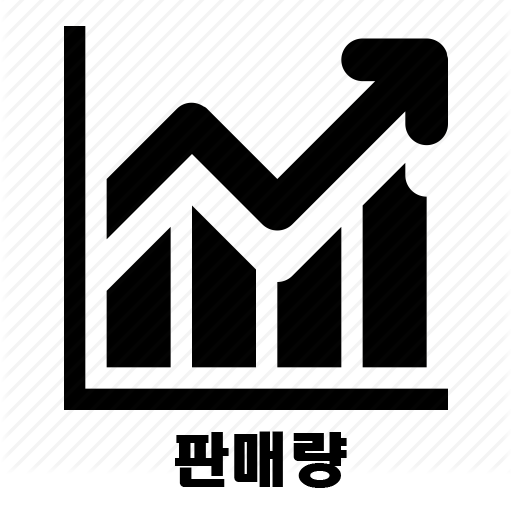
<style>
.page{position:relative;width:511px;height:511px;background:#ffffff}
.page>*{position:absolute;margin:0}
.t1{font:58.8px "HeadlineR-HM";color:#000000}
</style>
<div class="page">
<p class="t1" style="left:175px;top:431px;width:172px;height:57px">판매량</p>
</div>
